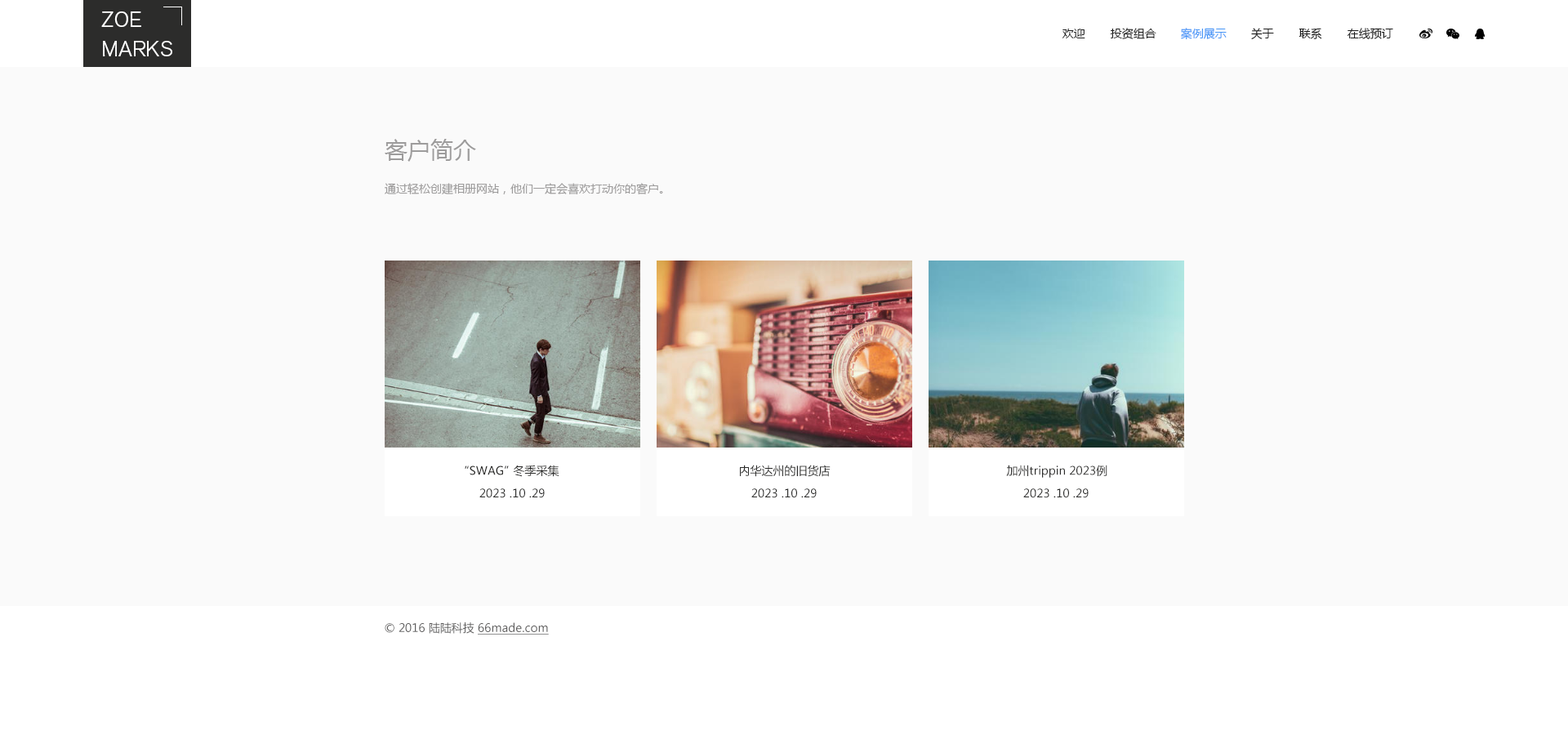
<style>
.page{position:relative;width:1568px;height:735px;background:#fafafa}
.page>*{position:absolute;margin:0}
.t1{font:21.2px/29.4px "AkzidenzGroteskBQ-LightSC";color:#ffffff}
.t2{font:11.4px "MicrosoftYaHei";color:#1c1c1c}
.t3{font:11.4px "MicrosoftYaHei";color:#4595f7}
.t4{font:22.9px "MicrosoftYaHei";color:#9d9c9c}
.t5{font:11.4px "MicrosoftYaHei";color:#9d9c9c}
.t6{font:11.4px "MicrosoftYaHei";color:#2c2c2b}
.t7{font:11.4px "MicrosoftYaHei";color:#5e5d5d}
.t8{font:11.4px "MicrosoftYaHei";color:#5e5d5d;text-decoration:underline}
</style>
<div class="page">
<p class="t1" style="left:101px;top:11px;width:71px;height:45px">ZOE<br>MARKS</p>
<p class="t2" style="left:1062px;top:29px;width:23px;height:9px">欢迎</p>
<p class="t2" style="left:1110px;top:28px;width:46px;height:11px">投资组合</p>
<p class="t3" style="left:1181px;top:28px;width:46px;height:12px">案例展示</p>
<p class="t2" style="left:1251px;top:28px;width:23px;height:11px">关于</p>
<p class="t2" style="left:1298px;top:28px;width:24px;height:11px">联系</p>
<p class="t2" style="left:1347px;top:28px;width:46px;height:11px">在线预订</p>
<p class="t4" style="left:385px;top:139px;width:91px;height:23px">客户简介</p>
<p class="t5" style="left:385px;top:183px;width:278px;height:11px">通过轻松创建相册网站，他们一定会喜欢打动你的客户。</p>
<p class="t6" style="left:465px;top:466px;width:44px;height:9px">“SWAG”</p>
<p class="t6" style="left:513px;top:465px;width:46px;height:12px">冬季采集</p>
<p class="t6" style="left:740px;top:465px;width:91px;height:12px">内华达州的旧货店</p>
<p class="t6" style="left:1006px;top:465px;width:101px;height:13px">加州trippin 2023例</p>
<p class="t6" style="left:479px;top:488px;width:66px;height:10px">2023 .10 .29</p>
<p class="t6" style="left:751px;top:488px;width:66px;height:10px">2023 .10 .29</p>
<p class="t6" style="left:1023px;top:488px;width:66px;height:10px">2023 .10 .29</p>
<p class="t7" style="left:385px;top:622px;width:164px;height:13px">© 2016 陆陆科技 <span class="t8">66made.com</span></p>
</div>
